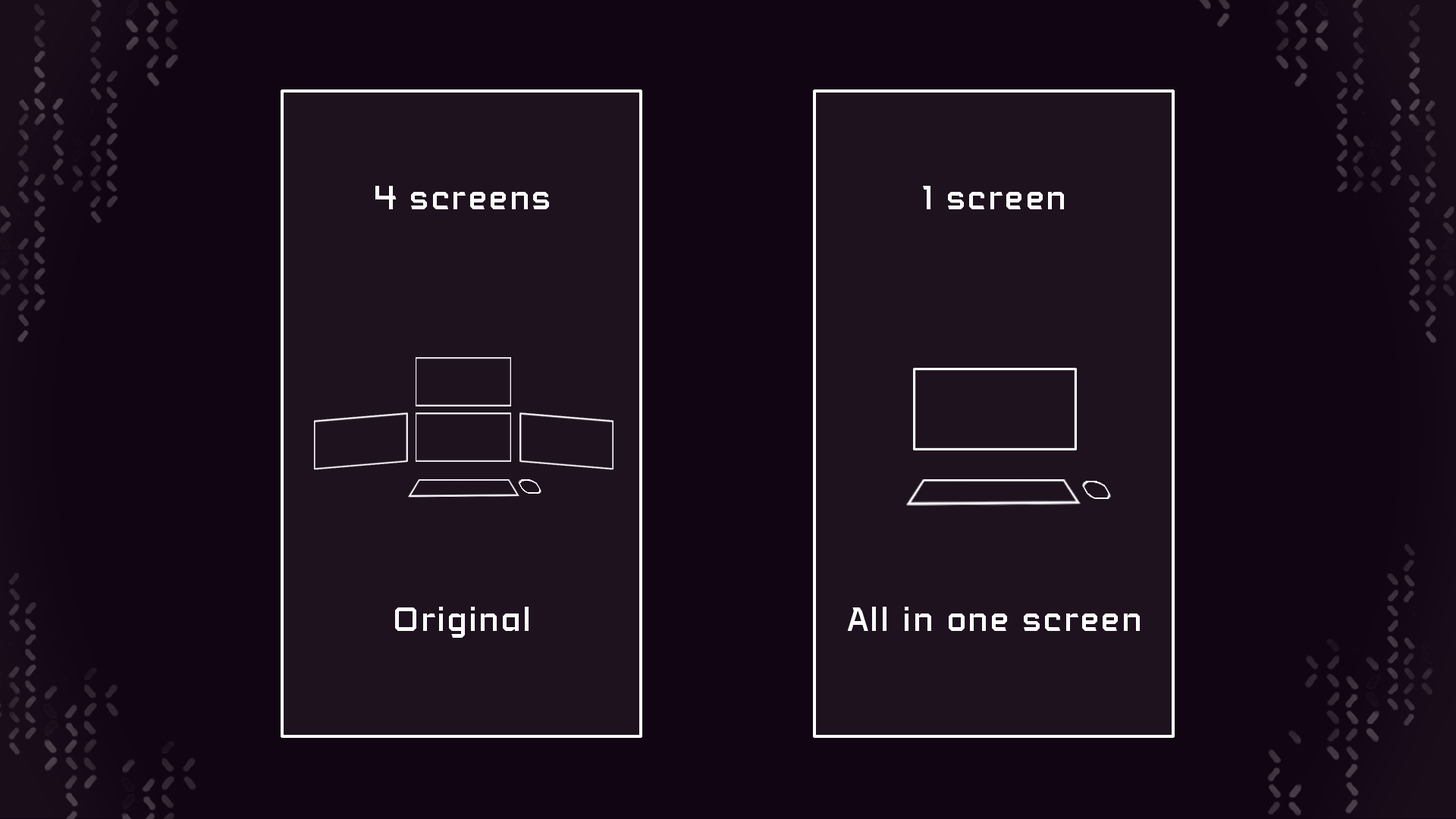
<style>
.page{position:relative;width:1456px;height:819px;background:#120513}
.page>*{position:absolute;margin:0}
.t1{font:31.6px "VoiceActivatedBB";color:#ffffff}
</style>
<div class="page">
<p class="t1" style="left:375px;top:186px;width:174px;height:23px">4 screens</p>
<p class="t1" style="left:923px;top:186px;width:141px;height:23px">1 screen</p>
<p class="t1" style="left:395px;top:607px;width:134px;height:31px">Original</p>
<p class="t1" style="left:847px;top:607px;width:293px;height:24px">All in one screen</p>
</div>
